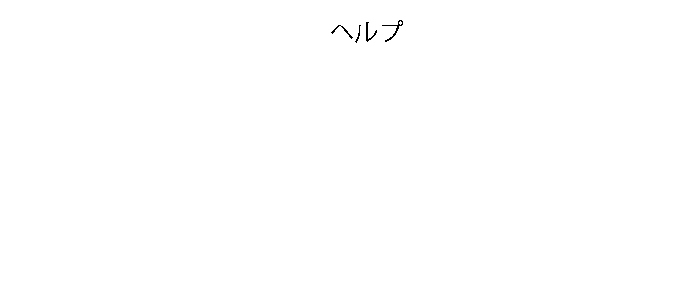
<style>
.page{position:relative;width:700px;height:300px;background:#ffffff}
.page>*{position:absolute;margin:0}
.t1{font:24px "KozGoPr6N-Regular";color:#000000}
</style>
<div class="page">
<p class="t1" style="left:331px;top:20px;width:72px;height:23px">ヘルプ</p>
</div>
